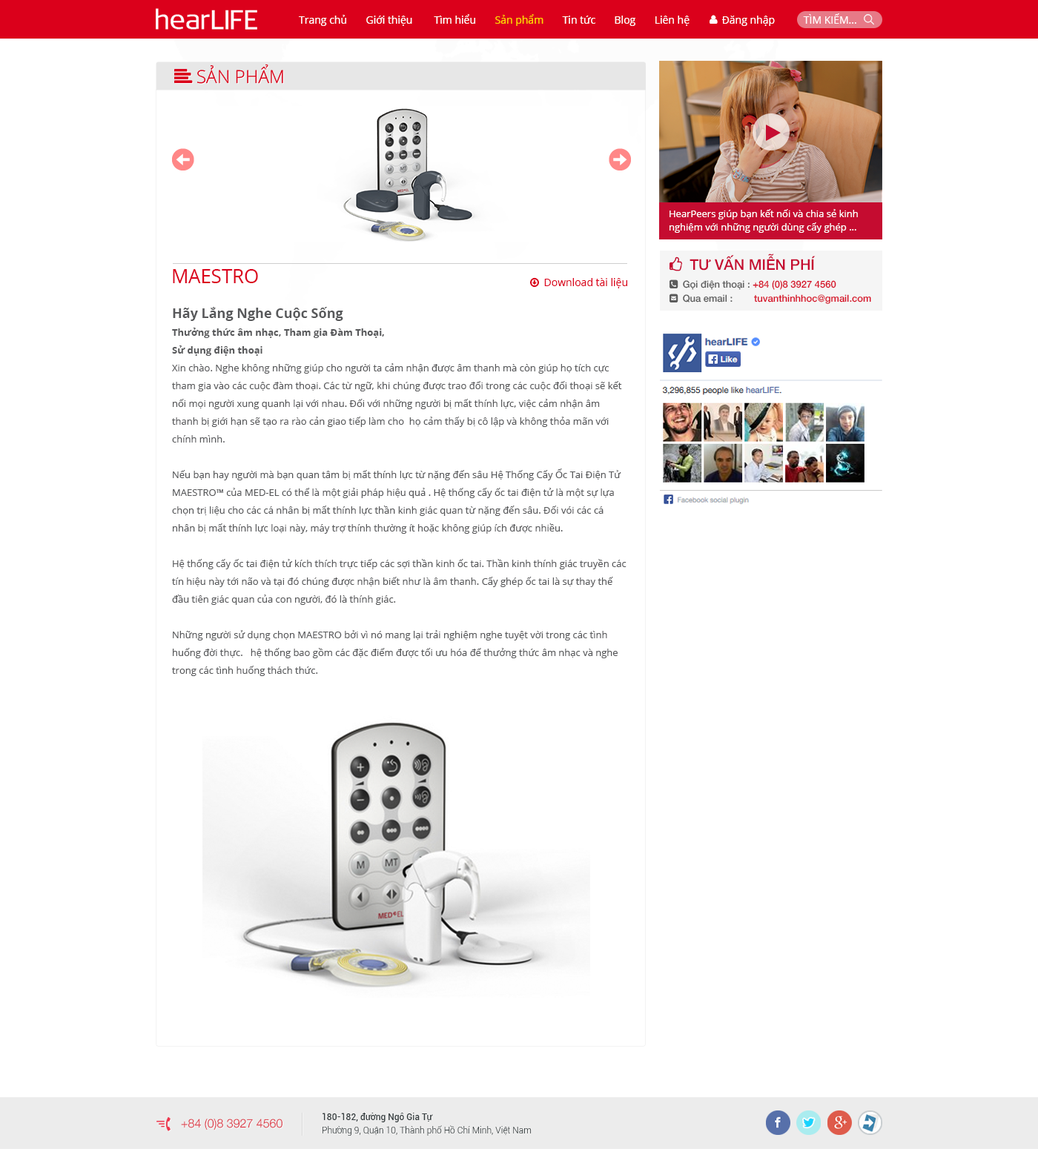
<style>
.page{position:relative;width:1038px;height:1149px;background:#ffffff}
.page>*{position:absolute;margin:0}
.t1{font:10.4px "OpenSans";color:#ffffff}
.t2{font:10.4px "OpenSans";color:#ffd800}
.t3{font:9.6px/13.3px "OpenSans";color:#ffffff}
.t4{font:19px "OpenSans";color:#db001b;text-transform:uppercase}
.t5{font:9.6px/17.8px "OpenSans";color:#58595b}
.t6{font:13.3px/17.8px "OpenSans-Bold";color:#58595b}
.t7{font:9.6px/17.8px "OpenSans-Bold";color:#58595b}
.t8{font:11.9px "HelveticaNeue-Light";color:#dd2f3f}
.t9{font:8.9px/13.3px "Roboto-Light";color:#373f41}
.t10{font:8.9px/13.3px "Roboto-Medium";color:#373f41}
</style>
<div class="page">
<p class="t1" style="left:299px;top:13px;width:557px;height:13px">Trang chủ       Giới thiệu        Tìm hiểu       <span class="t2">Sản phẩm</span>       Tin tức       Blog       Liên hệ            Đăng nhập           TÌM KIẾM...</p>
<p class="t3" style="left:669px;top:209px;width:189px;height:24px">HearPeers giúp bạn kết nối và chia sẻ kinh nghiệm với những người dùng cấy ghép ...</p>
<p class="t4" style="left:173px;top:269px;width:85px;height:14px">MAESTRO</p>
<p class="t5" style="left:172px;top:307px;width:454px;height:369px"><span class="t6">Hãy Lắng Nghe Cuộc Sống<br></span><span class="t7">Thưởng thức âm nhạc, Tham gia Đàm Thoại, <br>Sử dụng điện thoại<br></span>Xin chào. Nghe không những giúp cho người ta cảm nhận được âm thanh mà còn giúp họ tích cực tham gia vào các cuộc đàm thoại. Các từ ngữ, khi chúng được trao đổi trong các cuộc đối thoại sẽ kết nối mọi người xung quanh lại với nhau. Đối với những người bị mất thính lực, việc cảm nhận âm thanh bị giới hạn sẽ tạo ra rào cản giao tiếp làm cho  họ cảm thấy bị cô lập và không thỏa mãn với chính mình.<br><br>Nếu bạn hay người mà bạn quan tâm bị mất thính lực từ nặng đến sâu Hệ Thống Cấy Ốc Tai Điện Tử MAESTRO™ của MED‑EL có thể là một giải pháp hiệu quả . Hệ thống cấy ốc tai điện tử là một sự lựa chọn trị liệu cho các cá nhân bị mất thính lực thần kinh giác quan từ nặng đến sâu. Đối vói các cá nhân bị mất thính lực loại này, máy trợ thính thường ít hoặc không giúp ích được nhiều. <br><br>Hệ thống cấy ốc tai điện tử kích thích trực tiếp các sợi thần kinh ốc tai. Thần kinh thính giác truyền các tín hiệu này tới não và tại đó chúng được nhận biết như là âm thanh. Cấy ghép ốc tai là sự thay thế đầu tiên giác quan của con người, đó là thính giác.<br><br>Những người sử dụng chọn MAESTRO bởi vì nó mang lại trải nghiệm nghe tuyệt vời trong các tình huống đời thực.   hệ thống bao gồm các đặc điểm được tối ưu hóa để thưởng thức âm nhạc và nghe trong các tình huống thách thức.</p>
<p class="t8" style="left:181px;top:1119px;width:101px;height:11px">+84 (0)8 3927 4560</p>
<p class="t9" style="left:322px;top:1113px;width:210px;height:23px"><span class="t10">180-182, đường Ngô Gia Tự<br></span>Phường 9, Quận 10, Thành phố Hồ Chí Minh, Việt Nam</p>
</div>
